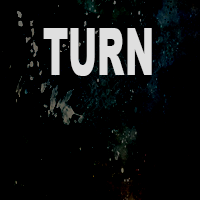
<style>
.page{position:relative;width:200px;height:200px;background:#000000}
.page>*{position:absolute;margin:0}
.t1{font:65px "Arial-Black";color:#dfdfdf;scale:0.54 1}
</style>
<div class="page">
<p class="t1" style="left:43px;top:28px;width:109px;height:48px">TURN</p>
</div>
